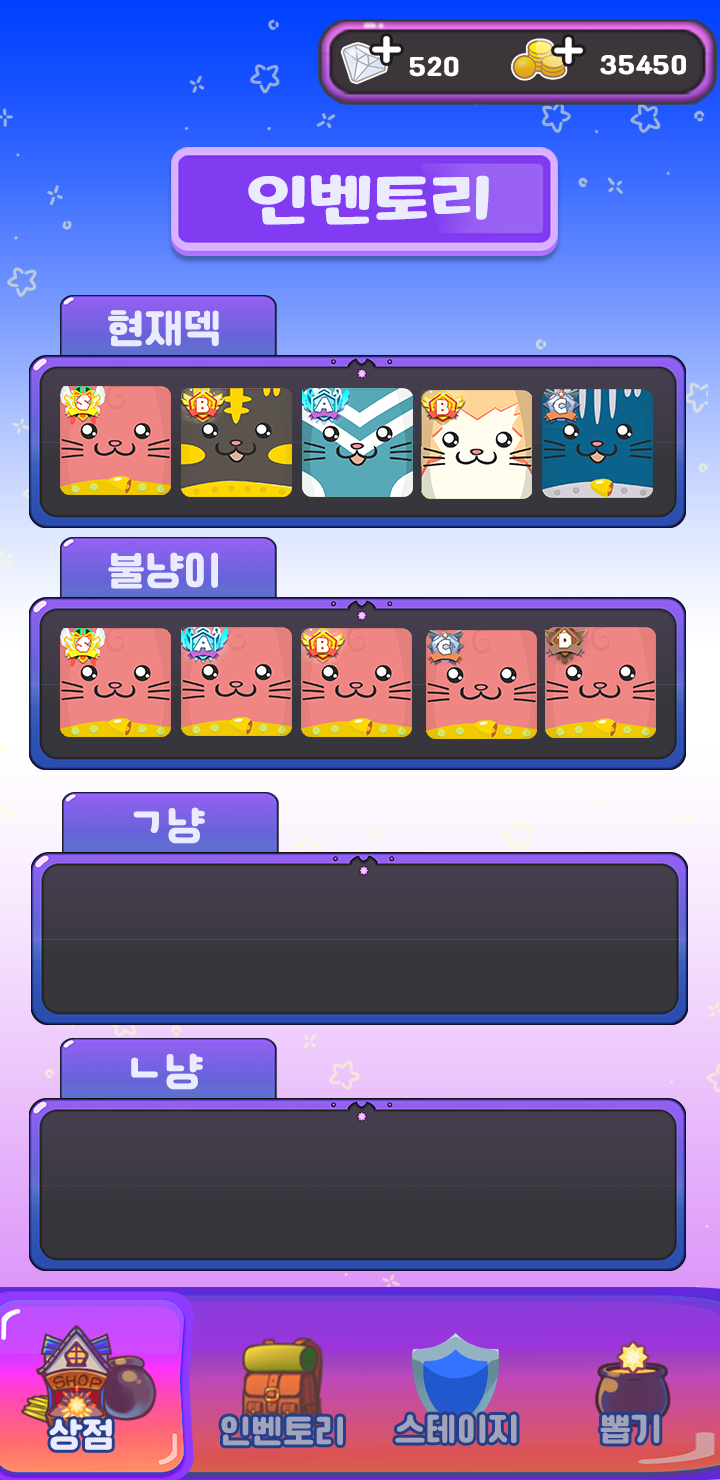
<style>
.page{position:relative;width:720px;height:1480px}
.page>*{position:absolute;margin:0}
.t1{font:25px "Cafe24Ssurround";color:#fefefe}
.t2{font:55px "MaplestoryBold";color:#eaebff;scale:1.3 1}
.t3{font:40.7px "Cafe24Ssurround";color:#eaebff}
.t4{font:35px "Cafe24Ssurround";color:#eaebff}
.t5{font:33px "Cafe24Ssurround";color:#a1a3bb}
</style>
<div class="page">
<p class="t1" style="left:409px;top:56px;width:50px;height:21px">520</p>
<p class="t1" style="left:600px;top:55px;width:86px;height:20px">35450</p>
<p class="t2" style="left:248px;top:174px;width:241px;height:51px">인벤토리</p>
<p class="t3" style="left:108px;top:310px;width:111px;height:37px">현재덱</p>
<p class="t3" style="left:108px;top:552px;width:110px;height:37px">불냥이</p>
<p class="t3" style="left:133px;top:807px;width:72px;height:37px">ㄱ냥</p>
<p class="t3" style="left:131px;top:1053px;width:72px;height:37px">ㄴ냥</p>
<p class="t4" style="left:49px;top:1419px;width:63px;height:31px">상점</p>
<p class="t5" style="left:221px;top:1416px;width:122px;height:30px">인벤토리</p>
<p class="t5" style="left:395px;top:1414px;width:122px;height:29px">스테이지</p>
<p class="t5" style="left:600px;top:1414px;width:60px;height:30px">뽑기</p>
</div>
